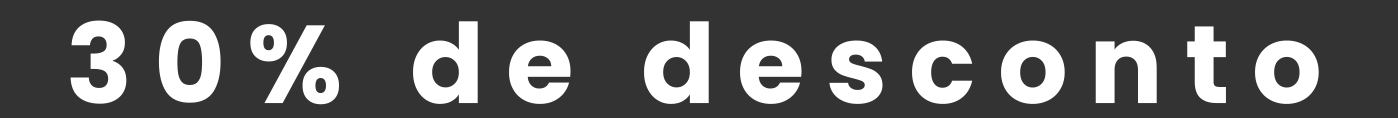
<style>
.page{position:relative;width:1398px;height:118px;background:#333333}
.page>*{position:absolute;margin:0}
.t1{font:110.3px "Poppins-Bold";letter-spacing:0.2em;color:#ffffff}
</style>
<div class="page">
<p class="t1" style="left:70px;top:20px;width:1249px;height:85px">30% de desconto</p>
</div>
